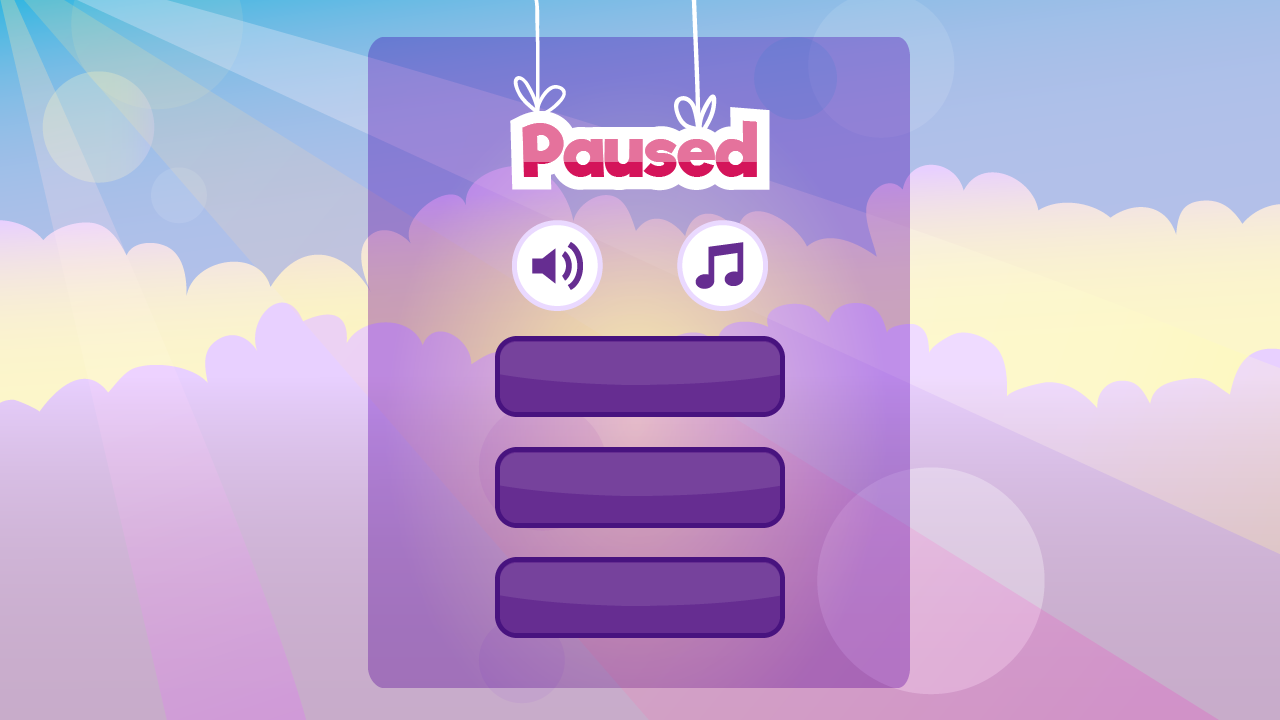
<style>
.page{position:relative;width:1280px;height:720px}
.page>*{position:absolute;margin:0}
.t1{font:70px "RifficFree-Bold"}
</style>
<div class="page">
<p class="t1" style="left:522px;top:120px;width:235px;height:57px">Paused</p>
<p class="t1" style="left:522px;top:120px;width:235px;height:57px">Paused</p>
</div>
